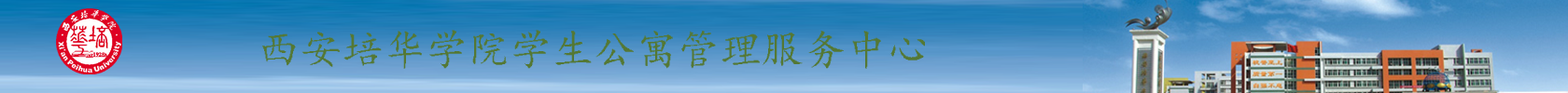
<style>
.page{position:relative;width:1568px;height:93px}
.page>*{position:absolute;margin:0}
.t1{font:42px "¿¬Ìå";color:#547834}
</style>
<div class="page">
<p class="t1" style="left:262px;top:30px;width:663px;height:39px">西安培华学院学生公寓管理服务中心</p>
</div>
